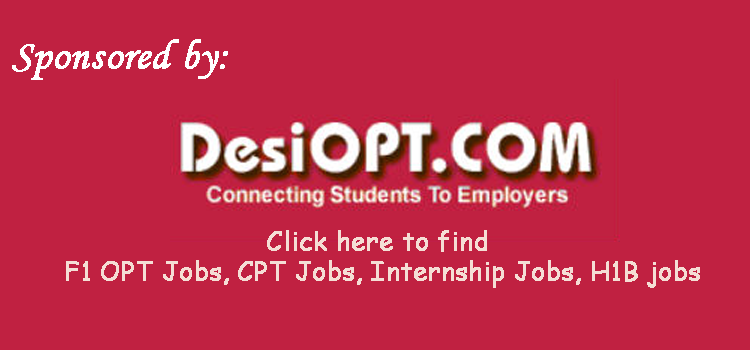
<style>
.page{position:relative;width:750px;height:350px;background:#c02141}
.page>*{position:absolute;margin:0}
.t1{font:41.7px "MonotypeCorsiva";color:#ffffff;font-weight:bold}
.t2{font:25px "ComicSansMS";color:#f5ded5;font-weight:bold}
</style>
<div class="page">
<p class="t1" style="left:12px;top:39px;width:216px;height:41px">Sponsored by:</p>
<p class="t2" style="left:66px;top:230px;width:634px;height:58px;text-align:center">Click here to find <br>F1 OPT Jobs, CPT Jobs, Internship Jobs, H1B jobs</p>
</div>
